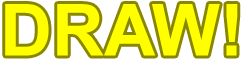
<style>
.page{position:relative;width:244px;height:59px;background:#ffff00}
.page>*{position:absolute;margin:0}
.t1{font:72px "Arial-BoldMT";color:#ffff00}
</style>
<div class="page">
<p class="t1" style="left:5px;top:4px;width:233px;height:52px">DRAW!</p>
</div>
